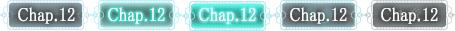
<style>
.page{position:relative;width:455px;height:31px}
.page>*{position:absolute;margin:0}
.t1{font:19px "MS-PMincho";color:#ffffff;font-weight:bold;scale:0.84 1}
</style>
<div class="page">
<p class="t1" style="left:18px;top:7px;width:57px;height:17px">Chap.12</p>
<p class="t1" style="left:108px;top:7px;width:57px;height:17px">Chap.12</p>
<p class="t1" style="left:199px;top:7px;width:57px;height:17px">Chap.12</p>
<p class="t1" style="left:290px;top:7px;width:57px;height:17px">Chap.12</p>
<p class="t1" style="left:381px;top:7px;width:57px;height:17px">Chap.12</p>
</div>
